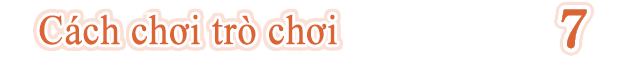
<style>
.page{position:relative;width:624px;height:65px;background:#ffffff}
.page>*{position:absolute;margin:0}
.t1{font:41.8px "TimesNewRomanPSMT";color:#dc6432;font-weight:bold;scale:0.91 1}
</style>
<div class="page">
<p class="t1" style="left:39px;top:14px;width:298px;height:31px">Cách chơi trò chơi</p>
</div>
